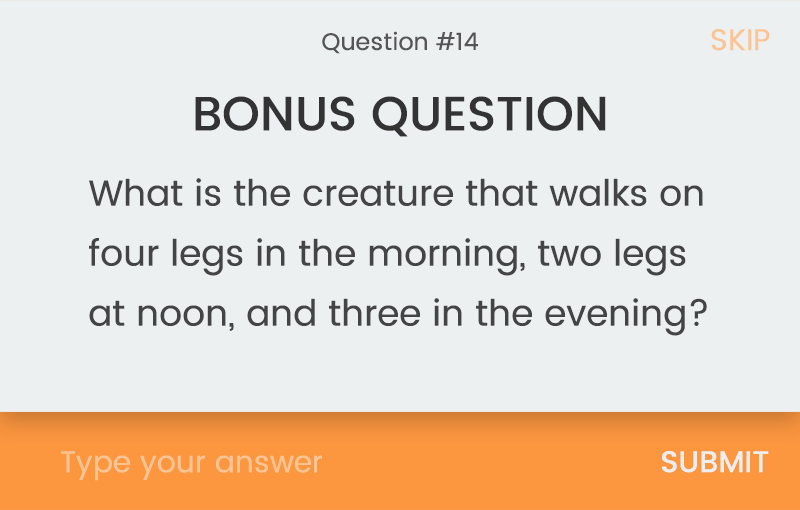
<style>
.page{position:relative;width:800px;height:510px;background:#ecf0f1}
.page>*{position:absolute;margin:0}
.t1{font:30px "Poppins-Regular";color:#fdc493}
.t2{font:24px "Poppins-Regular";color:#555555}
.t3{font:48px "Poppins-Medium";color:#333333}
.t4{font:36px/60px "Poppins-Regular";color:#444444}
.t5{font:30px "Poppins-Medium";color:#eeeeee}
</style>
<div class="page">
<p class="t1" style="left:711px;top:29px;width:59px;height:22px">SKIP</p>
<p class="t2" style="left:322px;top:31px;width:156px;height:23px">Question #14</p>
<p class="t3" style="left:195px;top:96px;width:411px;height:41px">BONUS QUESTION</p>
<p class="t4" style="left:89px;top:178px;width:618px;height:158px">What is the creature that walks on four legs in the morning, two legs at noon, and three in the evening?</p>
<p class="t1" style="left:61px;top:451px;width:261px;height:30px">Type your answer</p>
<p class="t5" style="left:662px;top:451px;width:107px;height:22px">SUBMIT</p>
</div>
